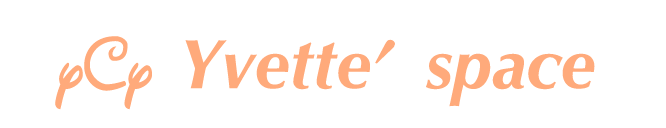
<style>
.page{position:relative;width:666px;height:128px;background:#ffffff}
.page>*{position:absolute;margin:0}
.t1{font:70px "Optima-BoldItalic";color:#ffab7b}
.t2{font:72px "WaltDisneyScriptv4.1";color:#ffab7b}
</style>
<div class="page">
<p class="t1" style="left:55px;top:36px;width:540px;height:74px"><span class="t2">yCy  </span>Yvette’space</p>
</div>
